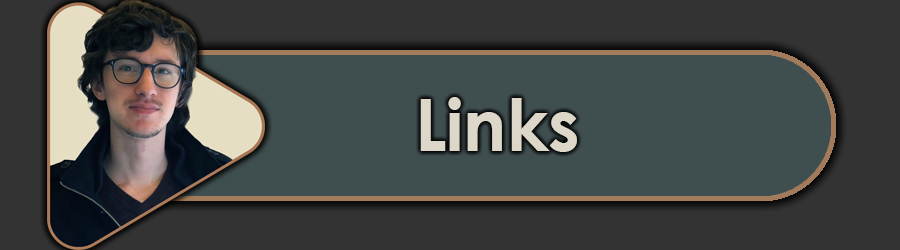
<style>
.page{position:relative;width:900px;height:250px;background:#333333}
.page>*{position:absolute;margin:0}
.t1{font:72px "CenturyGothic-Bold";color:#dcd7c9}
</style>
<div class="page">
<p class="t1" style="left:420px;top:97px;width:157px;height:55px">Links</p>
</div>
